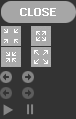
<style>
.page{position:relative;width:76px;height:119px;background:#333333}
.page>*{position:absolute;margin:0}
.t1{font:8px "PFJeefiveBold";color:#ffffff}
</style>
<div class="page">
<p class="t1" style="left:20px;top:8px;width:36px;height:8px">CLOSE</p>
</div>
